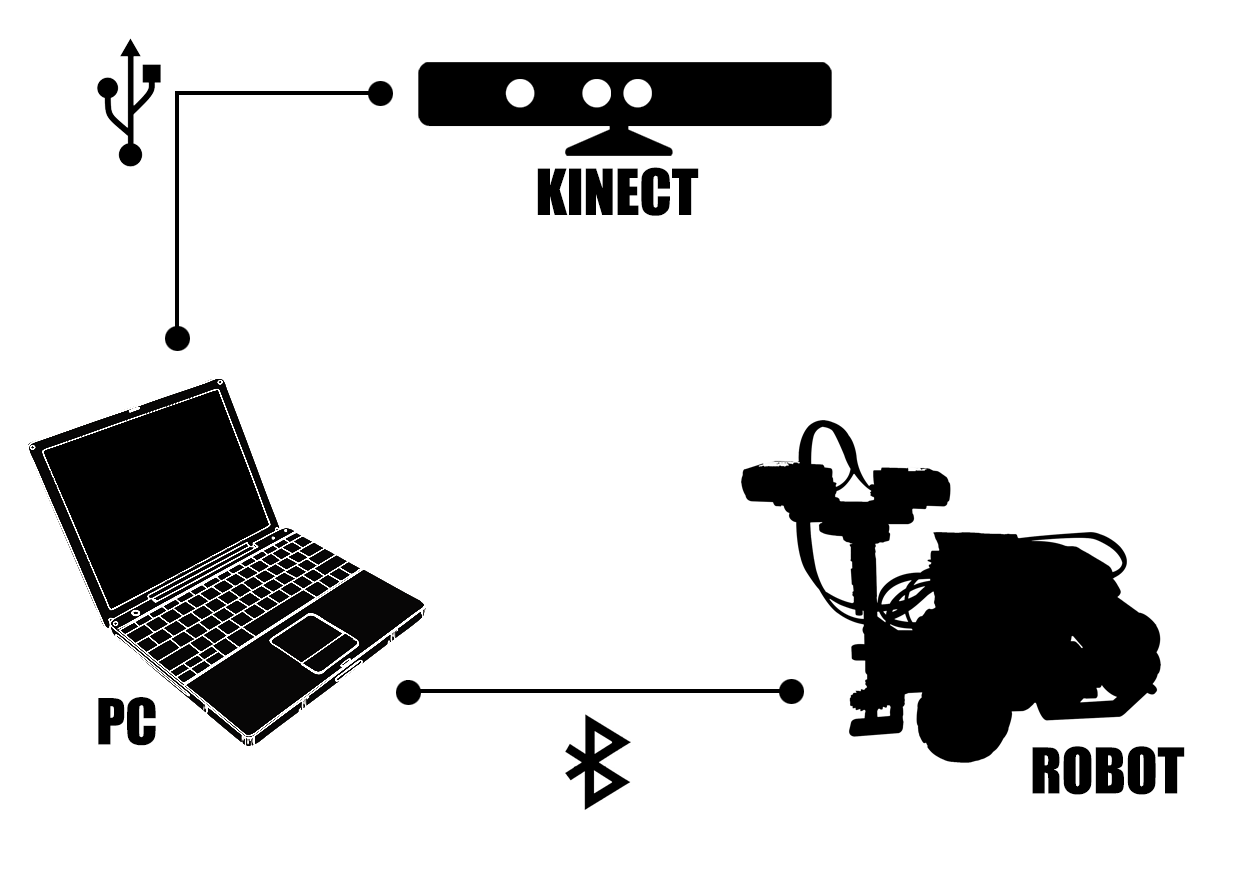
<style>
.page{position:relative;width:1240px;height:877px;background:#ffffff}
.page>*{position:absolute;margin:0}
.t1{font:58.3px "Impact";color:#000000}
</style>
<div class="page">
<p class="t1" style="left:537px;top:167px;width:162px;height:49px">KINECT</p>
<p class="t1" style="left:98px;top:697px;width:58px;height:49px">PC</p>
<p class="t1" style="left:1032px;top:746px;width:153px;height:49px">ROBOT</p>
</div>
